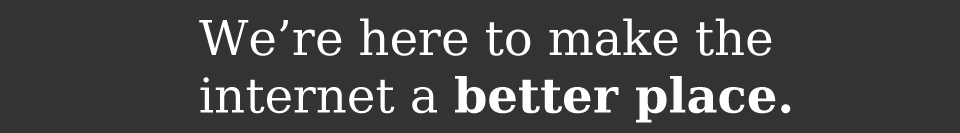
<style>
.page{position:relative;width:960px;height:133px;background:#333333}
.page>*{position:absolute;margin:0}
.t1{font:48px "BitstreamVeraSerif-Roman";color:#ffffff}
.t2{font:48px "BitstreamVeraSerif-Bold";color:#ffffff}
</style>
<div class="page">
<p class="t1" style="left:199px;top:18px;width:592px;height:105px;text-align:justify">We’re here to make the <br>internet a <span class="t2">better place.</span></p>
</div>
